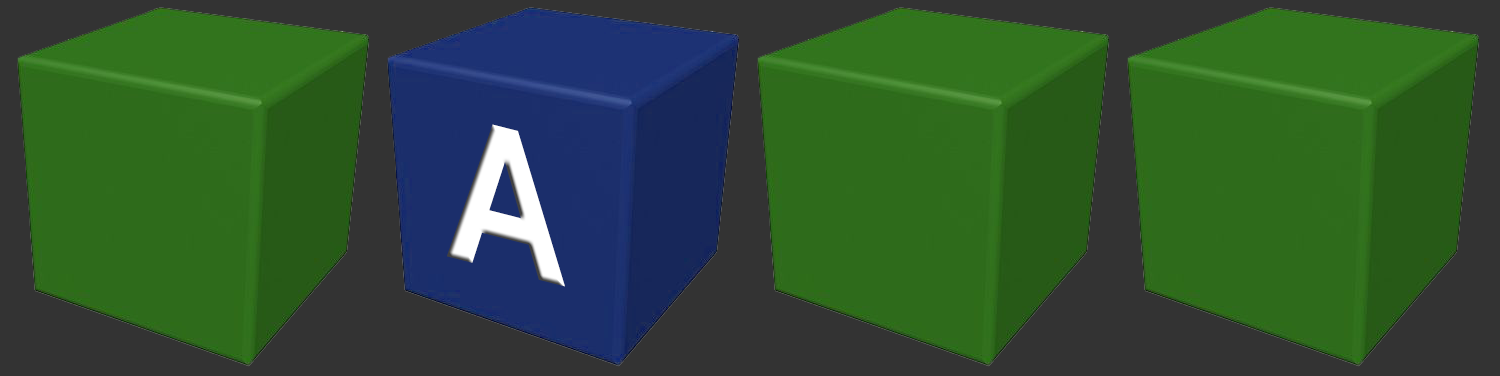
<style>
.page{position:relative;width:1500px;height:376px;background:#333333}
.page>*{position:absolute;margin:0}
.t1{font:200px "ArialNarrow-Bold";letter-spacing:0.025em;color:#ffffff;scale:1.03 1}
</style>
<div class="page">
<p class="t1" style="left:447px;top:124px;width:118px;height:163px;rotate:14deg">A</p>
</div>
